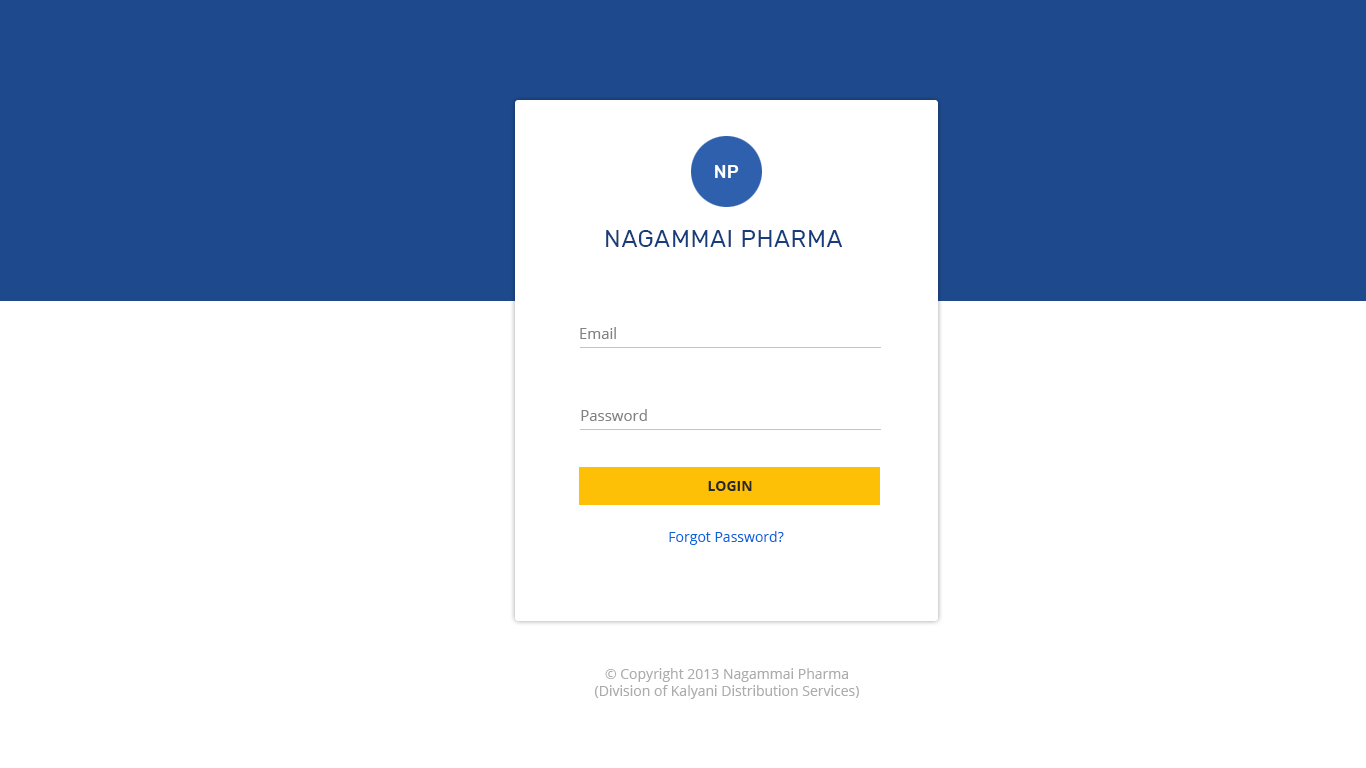
<style>
.page{position:relative;width:1366px;height:768px;background:#ffffff}
.page>*{position:absolute;margin:0}
.t1{font:18px "Rubik-Medium";letter-spacing:0.025em;color:#ffffff;text-transform:uppercase}
.t2{font:24px "Rubik-Regular";letter-spacing:0.025em;color:#173e7a;text-transform:uppercase}
.t3{font:15px "OpenSans";color:#818282}
.t4{font:14px "OpenSans-Bold";color:#282828;text-transform:uppercase}
.t5{font:14px "OpenSans";color:#0b64de}
.t6{font:14px/20px "OpenSans";color:#adacac}
</style>
<div class="page">
<p class="t1" style="left:715px;top:165px;width:24px;height:13px">NP</p>
<p class="t2" style="left:606px;top:230px;width:236px;height:17px">Nagammai Pharma</p>
<p class="t3" style="left:580px;top:327px;width:36px;height:12px">Email</p>
<p class="t3" style="left:581px;top:409px;width:66px;height:12px">Password</p>
<p class="t4" style="left:708px;top:481px;width:44px;height:10px">Login</p>
<p class="t5" style="left:669px;top:531px;width:115px;height:14px">Forgot Password?</p>
<p class="t6" style="left:594px;top:668px;width:265px;height:31px;text-align:center">© Copyright 2013 Nagammai Pharma<br>(Division of Kalyani Distribution Services)</p>
</div>
